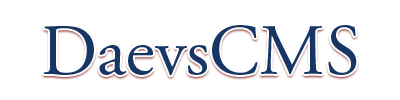
<style>
.page{position:relative;width:400px;height:100px;background:#ffffff}
.page>*{position:absolute;margin:0}
.t1{font:72px "AGaramondPro-Regular";color:#173664}
</style>
<div class="page">
<p class="t1" style="left:43px;top:25px;width:314px;height:51px">DaevsCMS</p>
</div>
